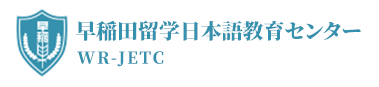
<style>
.page{position:relative;width:379px;height:87px;background:#ffffff}
.page>*{position:absolute;margin:0}
.t1{font:20.9px "SourceHanSerif-Heavy";color:#3591ad;text-transform:uppercase}
.t2{font:16.3px "SourceHanSerif-Heavy";letter-spacing:0.1em;color:#3591ad;text-transform:uppercase}
</style>
<div class="page">
<p class="t1" style="left:76px;top:20px;width:285px;height:21px">早稲田留学日本語教育センター</p>
<p class="t2" style="left:77px;top:51px;width:87px;height:16px">wR-JETC</p>
</div>
